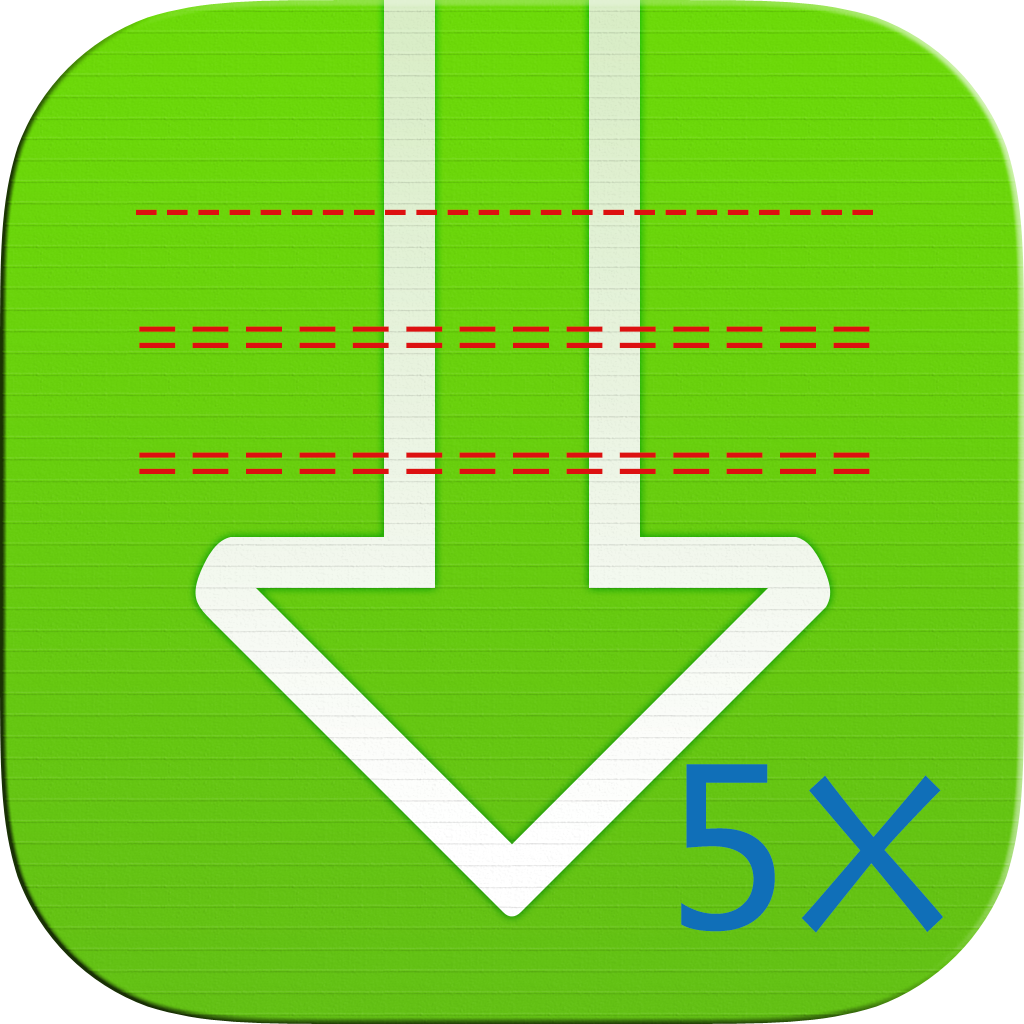
<style>
.page{position:relative;width:1024px;height:1024px}
.page>*{position:absolute;margin:0}
.t1{font:72px "MicrosoftYaHei";color:#dd1010}
.t2{font:216.9px "MicrosoftYaHei";color:#106fb8}
.t3{font:216.9px "LithosPro-Regular";color:#106fb8}
</style>
<div class="page">
<p class="t1" style="left:136px;top:209px;width:737px;height:265px">------------------------<br>==============<br>==============</p>
<p class="t2" style="left:681px;top:764px;width:262px;height:169px">5<span class="t3">X</span></p>
</div>
